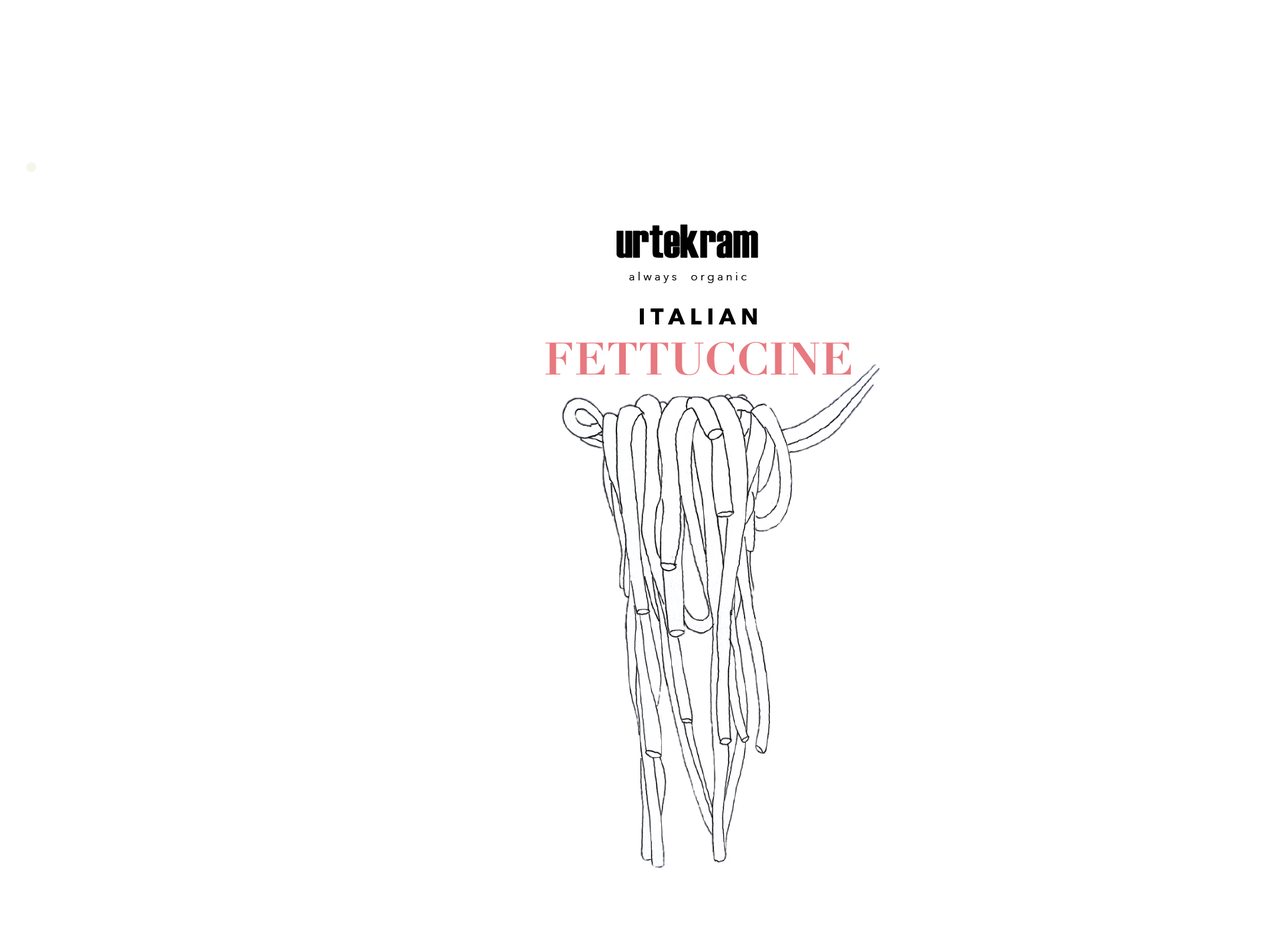
<style>
.page{position:relative;width:1261px;height:946px;background:#ffffff}
.page>*{position:absolute;margin:0}
.t1{font:11.1px "AvenirNext-Regular";letter-spacing:0.004em;color:#000000}
.t2{font:22.2px/25px "AvenirNext-Bold";letter-spacing:0.004em;color:#010101}
.t3{font:22.2px/25px "AvenirNext-Regular";letter-spacing:0.004em;color:#000000}
.t4{font:44.5px/25px "Didot-Bold";letter-spacing:0.004em;color:#e7797f}
</style>
<div class="page">
<p class="t1" style="left:629px;top:272px;width:118px;height:11px">a l w a y s     o r g a n i c</p>
<p class="t2" style="left:545px;top:308px;width:306px;height:67px;text-align:center">I T A L I A N<br><span class="t3"><br></span><span class="t4">FETTUCCINE</span></p>
</div>
